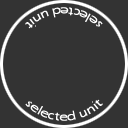
<style>
.page{position:relative;width:128px;height:128px;background:#333333}
.page>*{position:absolute;margin:0}
.t1{font:12px "MyriadPro-Regular";color:#fefefe}
</style>
<div class="page">
<p class="t1" style="left:25px;top:7px;width:78px;height:22px;rotate:180deg">selected unit</p>
<p class="t1" style="left:25px;top:99px;width:78px;height:22px">selected unit</p>
</div>
